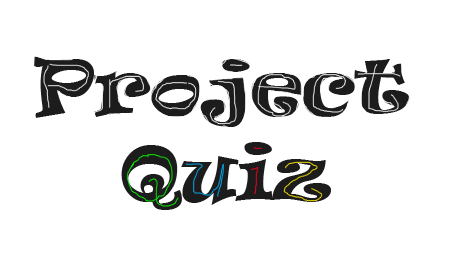
<style>
.page{position:relative;width:450px;height:253px;background:#ffffff}
.page>*{position:absolute;margin:0}
.t1{font:72px "Ravie";color:#1d1c1c}
</style>
<div class="page">
<p class="t1" style="left:34px;top:56px;width:376px;height:154px">Project<br>   Quiz</p>
</div>
